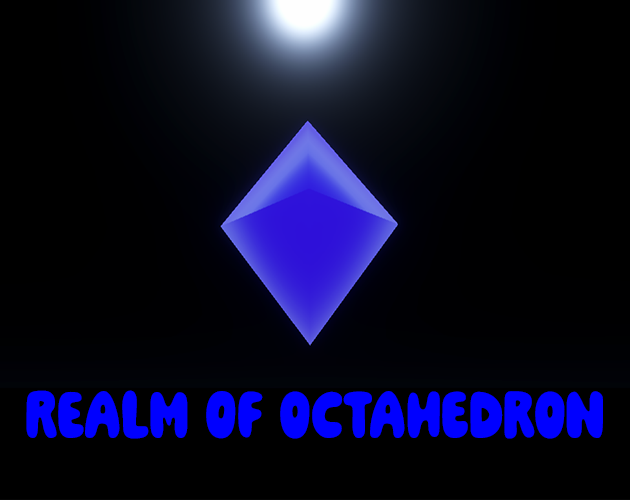
<style>
.page{position:relative;width:630px;height:500px;background:#000000}
.page>*{position:absolute;margin:0}
.t1{font:75px "PaindeMie-Regular";color:#0000ff}
</style>
<div class="page">
<p class="t1" style="left:26px;top:390px;width:577px;height:49px">Realm of Octahedron</p>
</div>
